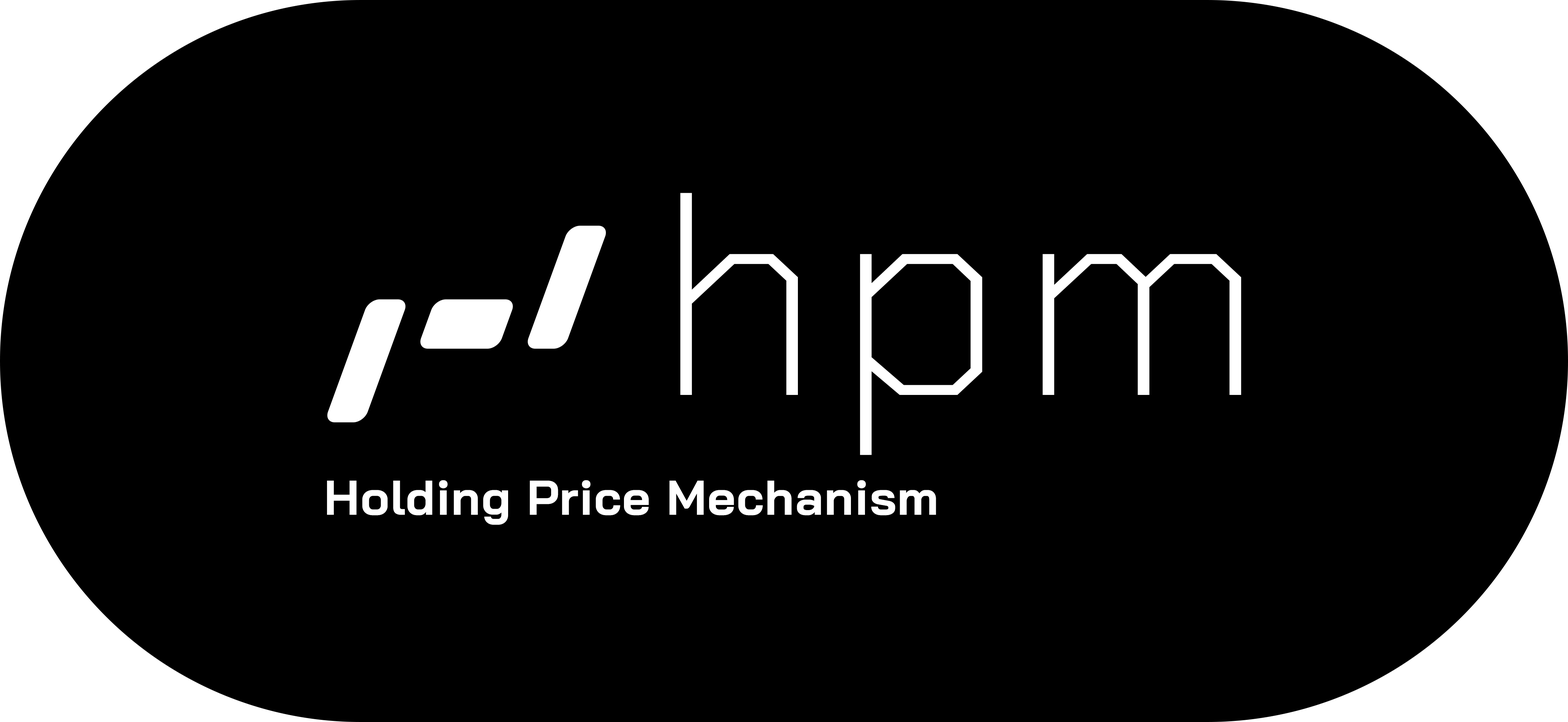
<style>
.page{position:relative;width:1568px;height:722px;background:#000000}
.page>*{position:absolute;margin:0}
.t1{font:48.7px "BaiJamjuree-Bold";letter-spacing:0.02em;color:#ffffff}
</style>
<div class="page">
<p class="t1" style="left:327px;top:480px;width:609px;height:45px">Holding Price Mechanism</p>
</div>
